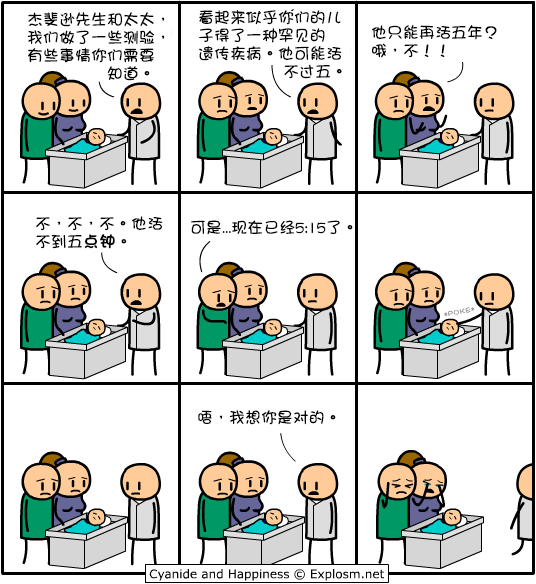
<style>
.page{position:relative;width:536px;height:584px;background:#ffffff}
.page>*{position:absolute;margin:0}
.t1{font:16px/18px "DFGirl";color:#000000}
.t2{font:16px/18px "DFGirl";color:#000000;font-weight:bold}
.t3{font:16px "DFGirl";color:#000000}
</style>
<div class="page">
<p class="t1" style="left:27px;top:12px;width:138px;height:69px">杰斐逊先生和太太，<br>我们做了一些测验，<br>有些事情你们需要<br>               知道。</p>
<p class="t1" style="left:198px;top:10px;width:144px;height:69px">看起来似乎你们的儿<br>子得了一种罕见的<br>遗传疾病。他可能活<br>                不过五。</p>
<p class="t1" style="left:371px;top:25px;width:126px;height:33px">他只能再活五年？<br>哦，不！！</p>
<p class="t1" style="left:36px;top:216px;width:127px;height:33px">不，不，不。他活<br>不到五<span class="t2">点钟</span>。</p>
<p class="t3" style="left:191px;top:220px;width:162px;height:15px">可是...现在已经5:15了。</p>
<p class="t3" style="left:198px;top:410px;width:138px;height:15px">唔，我想你是对的。</p>
</div>
